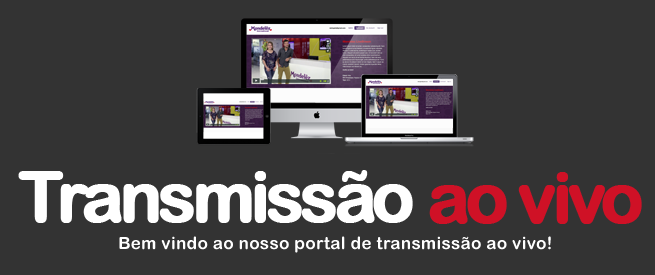
<style>
.page{position:relative;width:655px;height:275px;background:#333333}
.page>*{position:absolute;margin:0}
.t1{font:70px "ArialRoundedMTBold";letter-spacing:-0.08em;color:#ffffff;font-weight:bold}
.t2{font:70px "ArialRoundedMTBold";letter-spacing:-0.08em;color:#cf1126;font-weight:bold}
.t3{font:17.1px "ArialRoundedMTBold";letter-spacing:0.02em;color:#ffffff}
</style>
<div class="page">
<p class="t1" style="left:18px;top:170px;width:395px;height:53px">Transmissão</p>
<p class="t2" style="left:429px;top:172px;width:213px;height:52px">ao vivo</p>
<p class="t3" style="left:119px;top:236px;width:432px;height:17px">Bem vindo ao nosso portal de transmissão ao vivo!</p>
</div>
